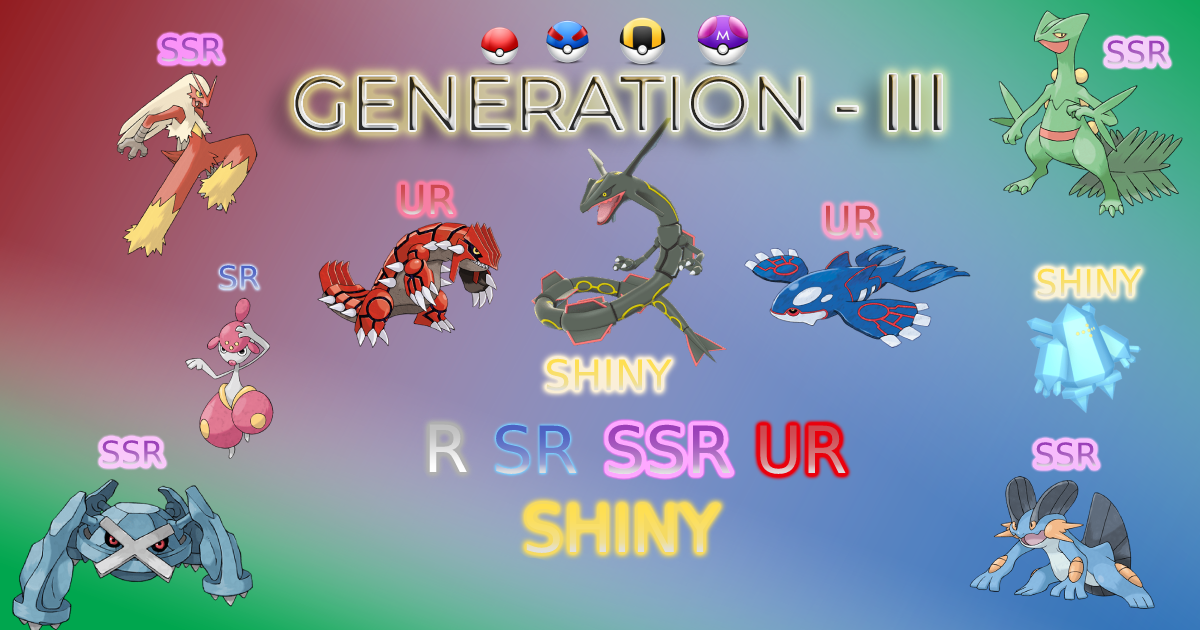
<style>
.page{position:relative;width:1200px;height:630px}
.page>*{position:absolute;margin:0}
.t1{font:32px "DejaVuSans"}
.t2{font:76px "Montserrat-Regular"}
.t3{font:76px "DejaVuSans"}
.t4{font:40px "DejaVuSans"}
.t5{font:36.9px "DejaVuSans";scale:0.94 1}
.t6{font:42px "DejaVuSans"}
</style>
<div class="page">
<p class="t1" style="left:161px;top:37px;width:61px;height:25px">SSR</p>
<p class="t1" style="left:1107px;top:40px;width:61px;height:25px">SSR</p>
<p class="t2" style="left:295px;top:74px;width:647px;height:57px">GENERATION - <span class="t3">Ⅰ</span><span class="t3">ⅠⅠ</span></p>
<p class="t4" style="left:401px;top:184px;width:53px;height:31px">UR</p>
<p class="t4" style="left:825px;top:205px;width:54px;height:31px">UR</p>
<p class="t1" style="left:219px;top:265px;width:41px;height:25px">SR</p>
<p class="t5" style="left:1037px;top:268px;width:104px;height:29px">SHINY</p>
<p class="t6" style="left:547px;top:358px;width:125px;height:33px">SHINY</p>
<p class="t1" style="left:102px;top:440px;width:61px;height:25px">SSR</p>
<p class="t1" style="left:1036px;top:442px;width:61px;height:25px">SSR</p>
</div>
